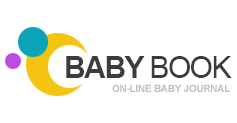
<style>
.page{position:relative;width:237px;height:123px;background:#ffffff}
.page>*{position:absolute;margin:0}
.t1{font:30px "Arial-BoldMT";letter-spacing:-0.05em;color:#3c3c3c;text-transform:uppercase}
.t2{font:30px "ArialMT";letter-spacing:-0.05em;color:#3c3c3c;text-transform:uppercase}
.t3{font:10px "Arial-BoldMT";letter-spacing:-0.025em;color:#bfbfbf;text-transform:uppercase}
</style>
<div class="page">
<p class="t1" style="left:66px;top:56px;width:166px;height:22px">Baby <span class="t2">Book</span></p>
<p class="t3" style="left:112px;top:84px;width:118px;height:8px">on-line Baby Journal</p>
</div>
